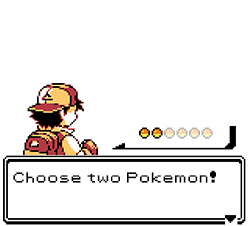
<style>
.page{position:relative;width:250px;height:226px;background:#ffffff}
.page>*{position:absolute;margin:0}
.t1{font:11.7px "Pokemon-Classic";color:#000000}
</style>
<div class="page">
<p class="t1" style="left:13px;top:170px;width:203px;height:13px">Choose two Pokemon!</p>
</div>
